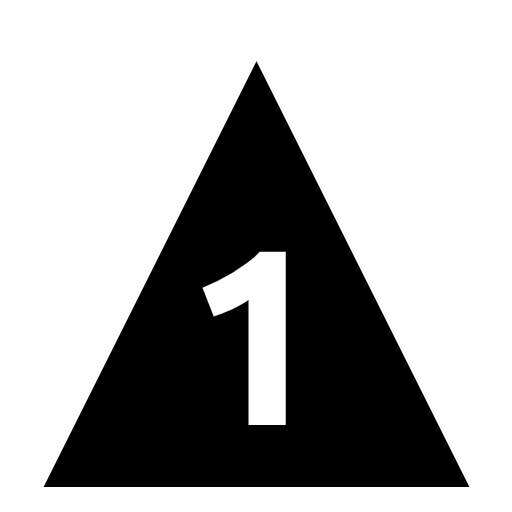
<style>
.page{position:relative;width:512px;height:512px;background:#ffffff}
.page>*{position:absolute;margin:0}
.t1{font:250px "Ubuntu-Bold";color:#ffffff}
</style>
<div class="page">
<p class="t1" style="left:202px;top:251px;width:84px;height:174px">1</p>
</div>
